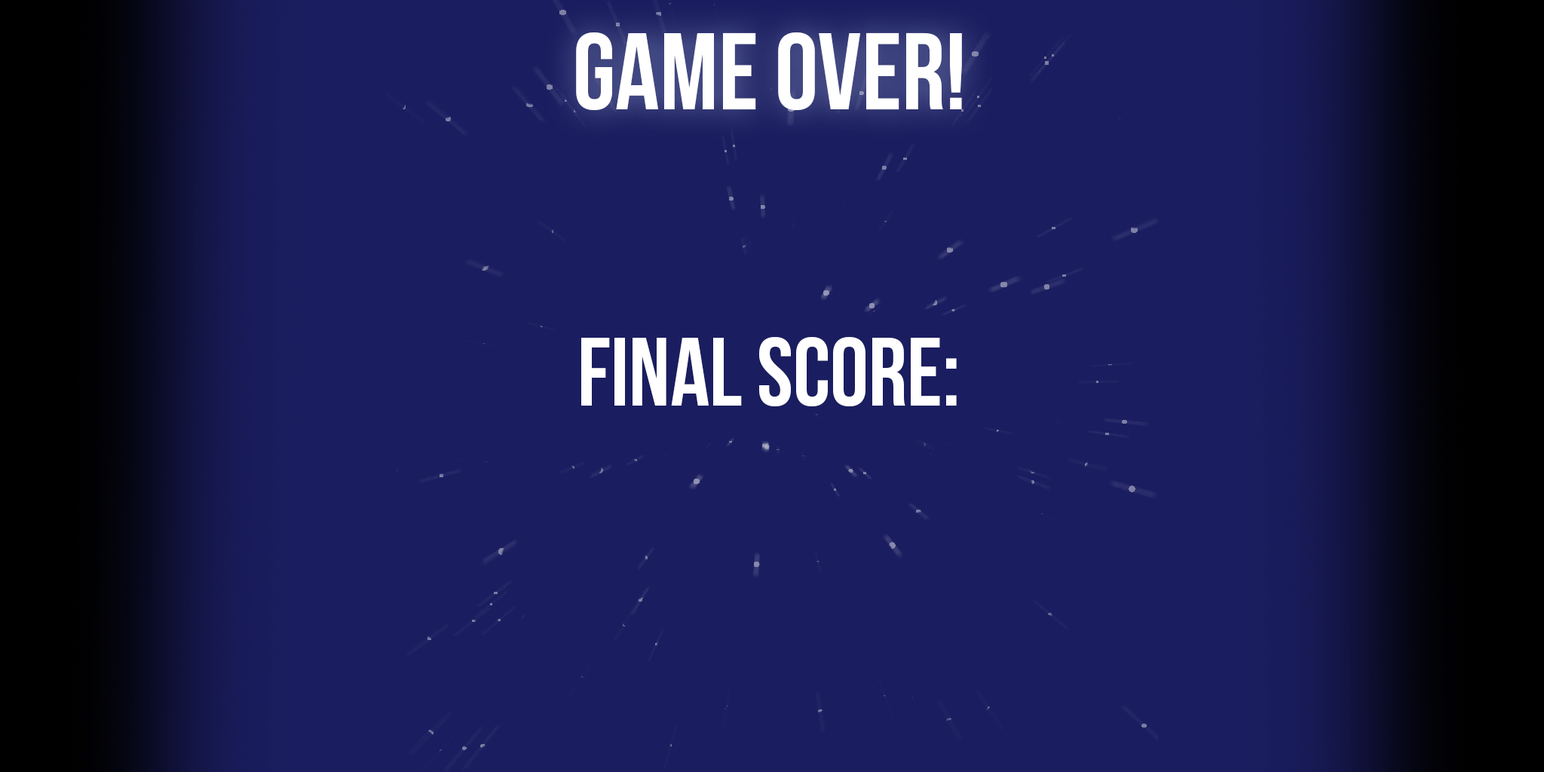
<style>
.page{position:relative;width:1544px;height:772px;background:#1a1d5f}
.page>*{position:absolute;margin:0}
.t1{font:108.6px "BebasNeue";color:#ffffff}
.t2{font:96.5px "BebasNeue";color:#ffffff}
</style>
<div class="page">
<p class="t1" style="left:576px;top:32px;width:386px;height:79px">Game Over!</p>
<p class="t2" style="left:581px;top:337px;width:376px;height:69px">Final Score:</p>
</div>
